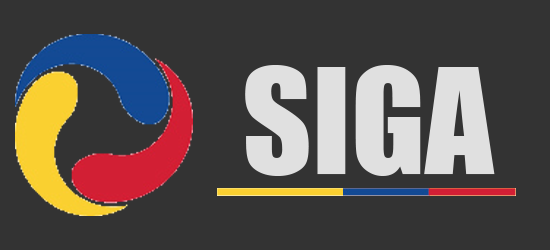
<style>
.page{position:relative;width:550px;height:250px;background:#333333}
.page>*{position:absolute;margin:0}
.t1{font:135px "Impact";color:#e0e0e0}
</style>
<div class="page">
<p class="t1" style="left:245px;top:65px;width:250px;height:111px">SIGA</p>
</div>
